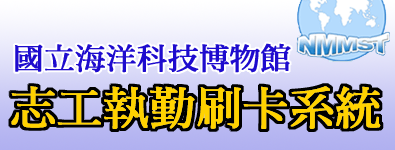
<style>
.page{position:relative;width:395px;height:150px}
.page>*{position:absolute;margin:0}
.t1{font:30px "DFMing-Bd-HK-BF";letter-spacing:0.005em;color:#1e0bce;font-weight:bold}
.t2{font:45px "DFMing-Bd-HK-BF";letter-spacing:0.005em;color:#ffd200;font-weight:bold}
</style>
<div class="page">
<p class="t1" style="left:15px;top:43px;width:276px;height:30px">國立海洋科技博物館</p>
<p class="t2" style="left:11px;top:86px;width:370px;height:43px">志工執勤刷卡系統</p>
</div>
